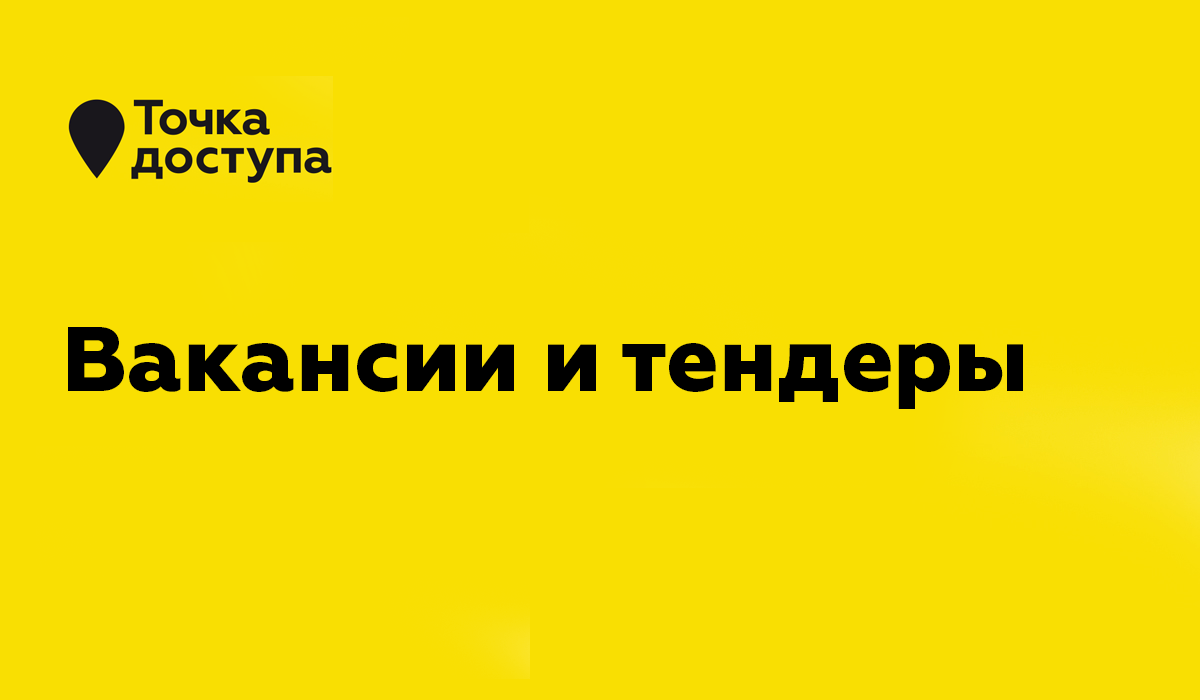
<style>
.page{position:relative;width:1200px;height:700px;background:#f9df02}
.page>*{position:absolute;margin:0}
.t1{font:91.7px "Geometria-ExtraBold";color:#000000}
</style>
<div class="page">
<p class="t1" style="left:68px;top:327px;width:955px;height:82px">Вакансии и тендеры</p>
</div>
